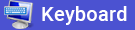
<style>
.page{position:relative;width:135px;height:30px;background:#4b52d1}
.page>*{position:absolute;margin:0}
.t1{font:20px "Roboto-Medium";color:#ffffff}
</style>
<div class="page">
<p class="t1" style="left:42px;top:6px;width:85px;height:19px">Keyboard</p>
</div>
